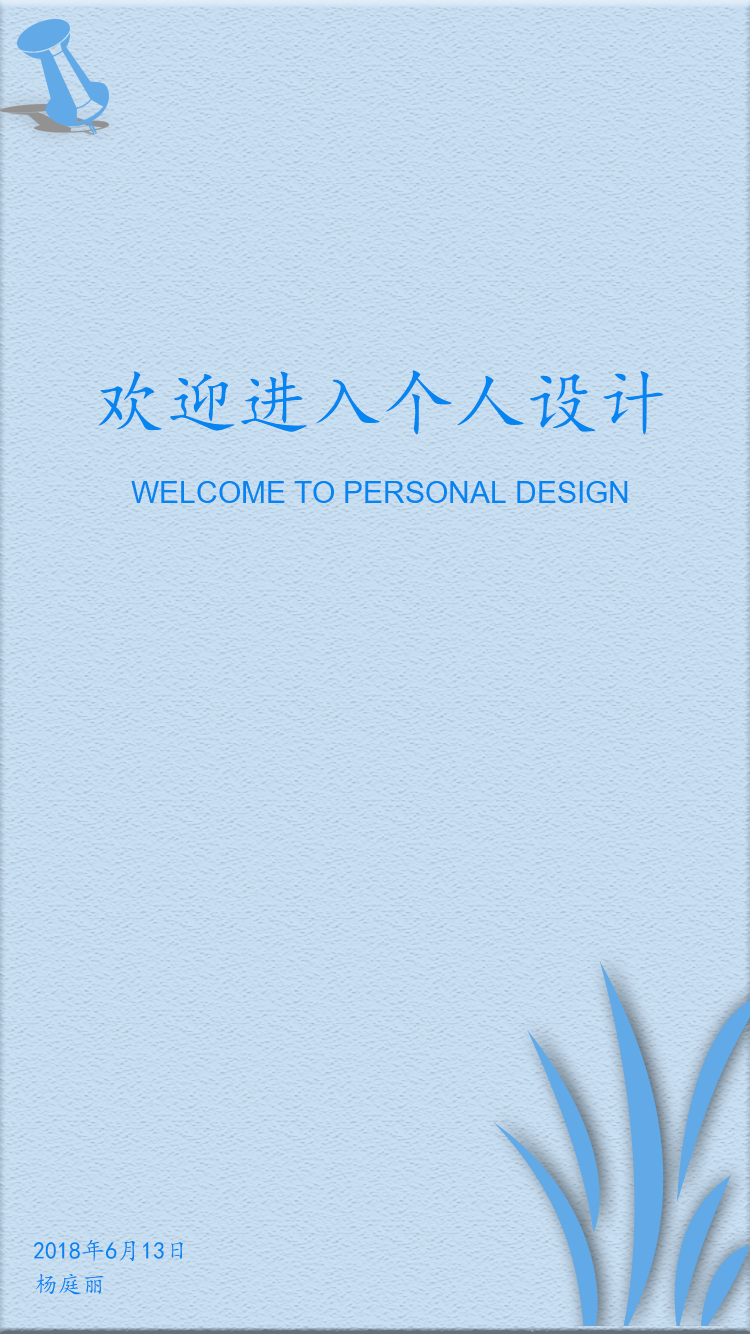
<style>
.page{position:relative;width:750px;height:1334px}
.page>*{position:absolute;margin:0}
.t1{font:72px "KaiTi";color:#0685f1}
.t2{font:30px "ArialMT";color:#0685f1;text-transform:uppercase}
.t3{font:24px "KaiTi";color:#0685f1}
</style>
<div class="page">
<p class="t1" style="left:98px;top:370px;width:566px;height:65px">欢迎进入个人设计</p>
<p class="t2" style="left:131px;top:481px;width:497px;height:22px">Welcome to personal design</p>
<p class="t3" style="left:33px;top:1239px;width:150px;height:23px">2018年6月13日</p>
<p class="t3" style="left:35px;top:1273px;width:69px;height:22px">杨庭丽</p>
</div>
